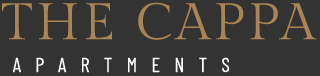
<style>
.page{position:relative;width:320px;height:76px;background:#333333}
.page>*{position:absolute;margin:0}
.t1{font:51px "GildaDisplay-Regular";letter-spacing:0.08em;color:#aa8453}
.t2{font:20.2px "BarlowCondensed-Regular";letter-spacing:0.705em;color:#ffffff;text-transform:uppercase}
</style>
<div class="page">
<p class="t1" style="left:2px;top:2px;width:315px;height:38px">THE CAPPA</p>
<p class="t2" style="left:13px;top:57px;width:217px;height:16px">Apartments</p>
</div>
